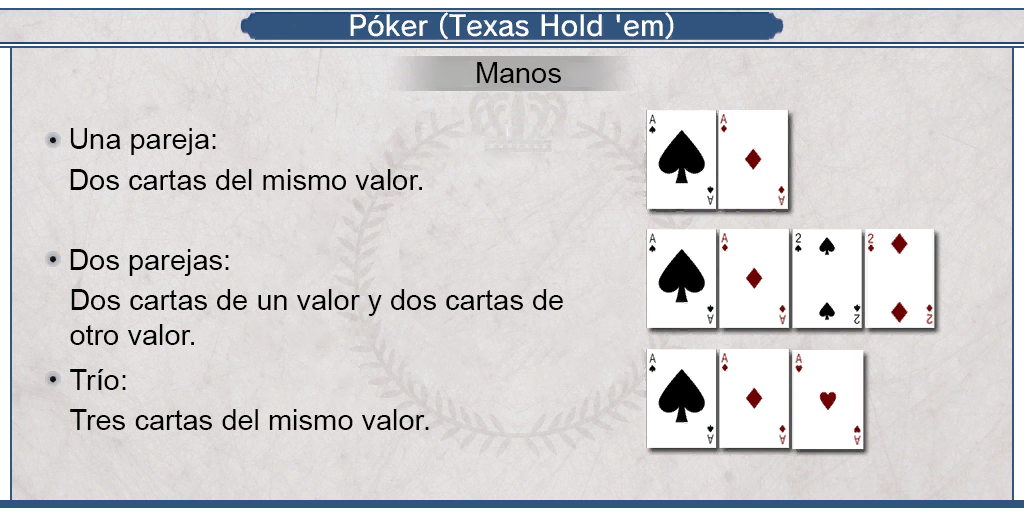
<style>
.page{position:relative;width:1024px;height:512px}
.page>*{position:absolute;margin:0}
.t1{font:29px "ArialMT";color:#000000}
</style>
<div class="page">
<p class="t1" style="left:477px;top:62px;width:84px;height:21px">Manos</p>
<p class="t1" style="left:70px;top:128px;width:146px;height:27px">Una pareja:</p>
<p class="t1" style="left:70px;top:169px;width:352px;height:21px">Dos cartas del mismo valor.</p>
<p class="t1" style="left:70px;top:249px;width:159px;height:27px">Dos parejas:</p>
<p class="t1" style="left:70px;top:289px;width:493px;height:56px">Dos cartas de un valor y dos cartas de <br>otro valor.</p>
<p class="t1" style="left:70px;top:369px;width:56px;height:21px">Trío:</p>
<p class="t1" style="left:70px;top:409px;width:359px;height:21px">Tres cartas del mismo valor.</p>
</div>
